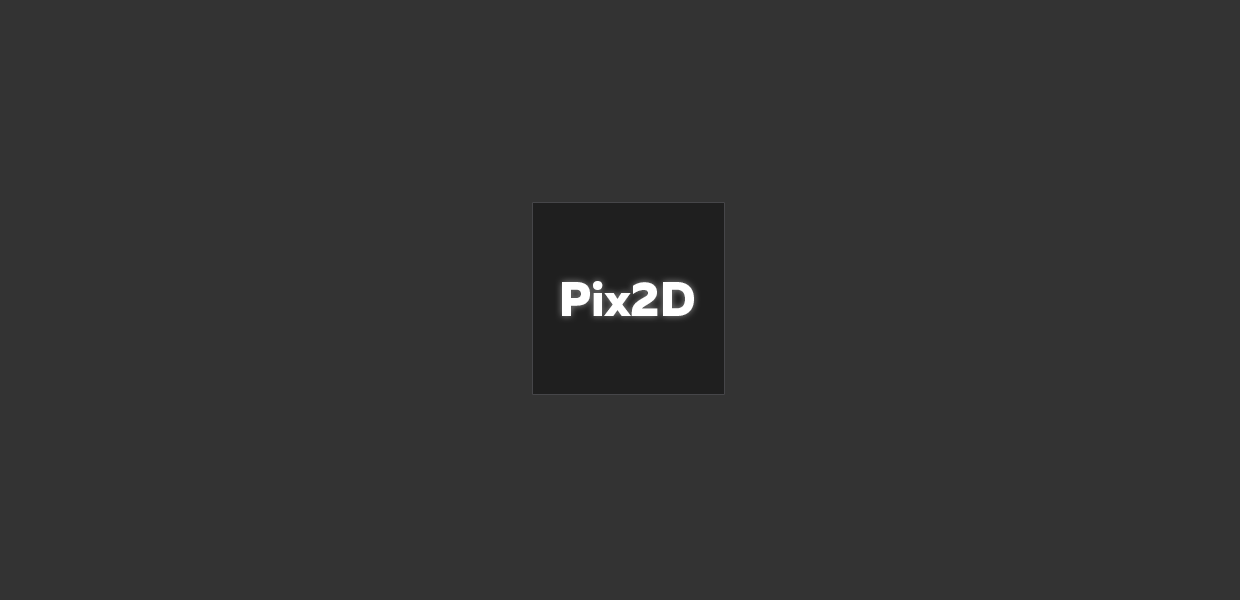
<style>
.page{position:relative;width:1240px;height:600px;background:#333333}
.page>*{position:absolute;margin:0}
.t1{font:48px "MullerExtraBold";color:#ffffff}
</style>
<div class="page">
<p class="t1" style="left:562px;top:281px;width:132px;height:35px">Pix2D</p>
</div>
